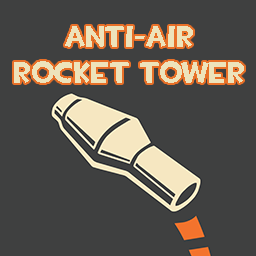
<style>
.page{position:relative;width:256px;height:256px;background:#3f4040}
.page>*{position:absolute;margin:0}
.t1{font:30px/36px "TF2Build";color:#ede3bb}
</style>
<div class="page">
<p class="t1" style="left:14px;top:26px;width:230px;height:57px;text-align:center">Anti-Air<br>Rocket Tower</p>
</div>
